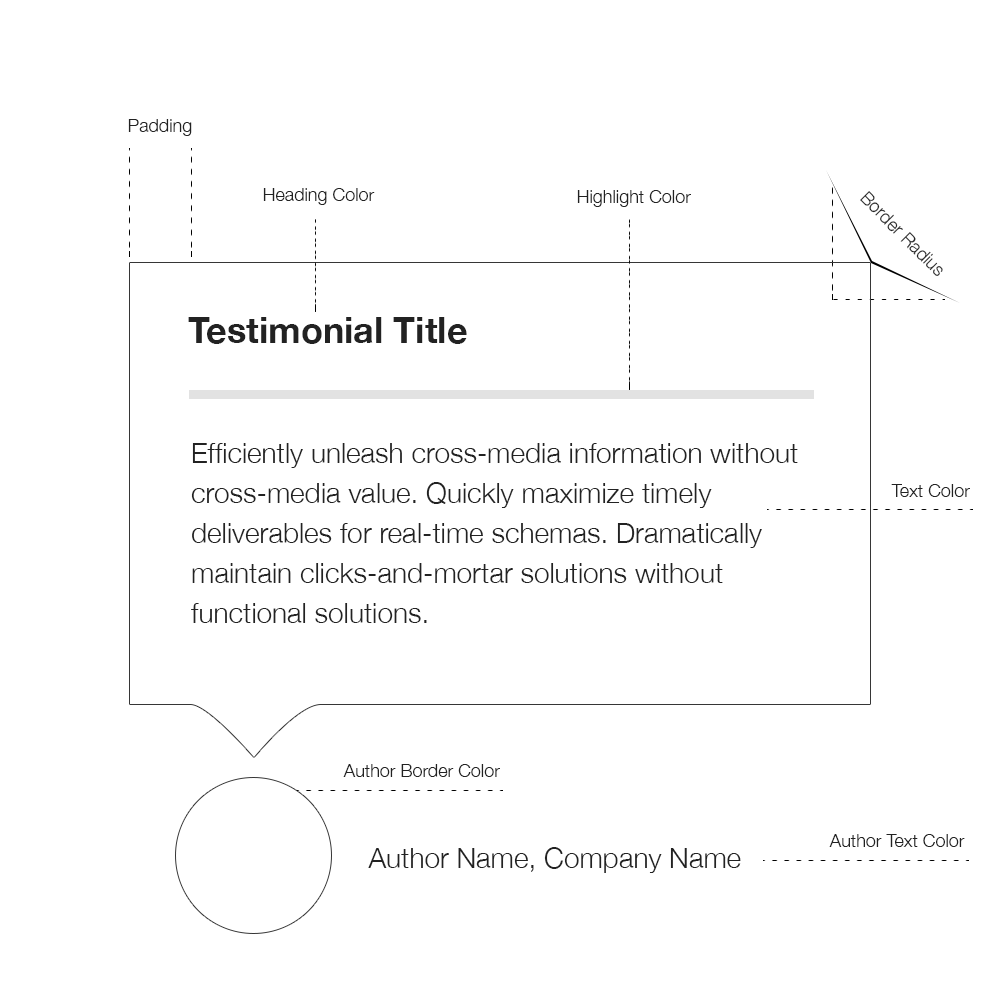
<style>
.page{position:relative;width:1000px;height:1000px;background:#ffffff}
.page>*{position:absolute;margin:0}
.t1{font:18px "HelveticaNeue-Light";color:#222222}
.t2{font:36px "HelveticaNeue-Bold";color:#222222}
.t3{font:28px/40px "HelveticaNeue-Light";color:#222222}
.t4{font:28px "HelveticaNeue-Light";color:#222222}
</style>
<div class="page">
<p class="t1" style="left:128px;top:119px;width:64px;height:17px">Padding</p>
<p class="t1" style="left:263px;top:188px;width:112px;height:17px">Heading Color</p>
<p class="t1" style="left:577px;top:190px;width:114px;height:17px">Highlight Color</p>
<p class="t1" style="left:860px;top:191px;width:83px;height:85px;rotate:45deg">Border Radius</p>
<p class="t2" style="left:188px;top:317px;width:279px;height:27px">Testimonial Title</p>
<p class="t3" style="left:191px;top:443px;width:607px;height:180px">Efficiently unleash cross-media information without cross-media value. Quickly maximize timely deliverables for real-time schemas. Dramatically maintain clicks-and-mortar solutions without functional solutions.</p>
<p class="t1" style="left:891px;top:484px;width:79px;height:13px">Text Color</p>
<p class="t1" style="left:343px;top:764px;width:157px;height:13px">Author Border Color</p>
<p class="t1" style="left:829px;top:834px;width:136px;height:13px">Author Text Color</p>
<p class="t4" style="left:368px;top:847px;width:373px;height:26px">Author Name, Company Name</p>
</div>
